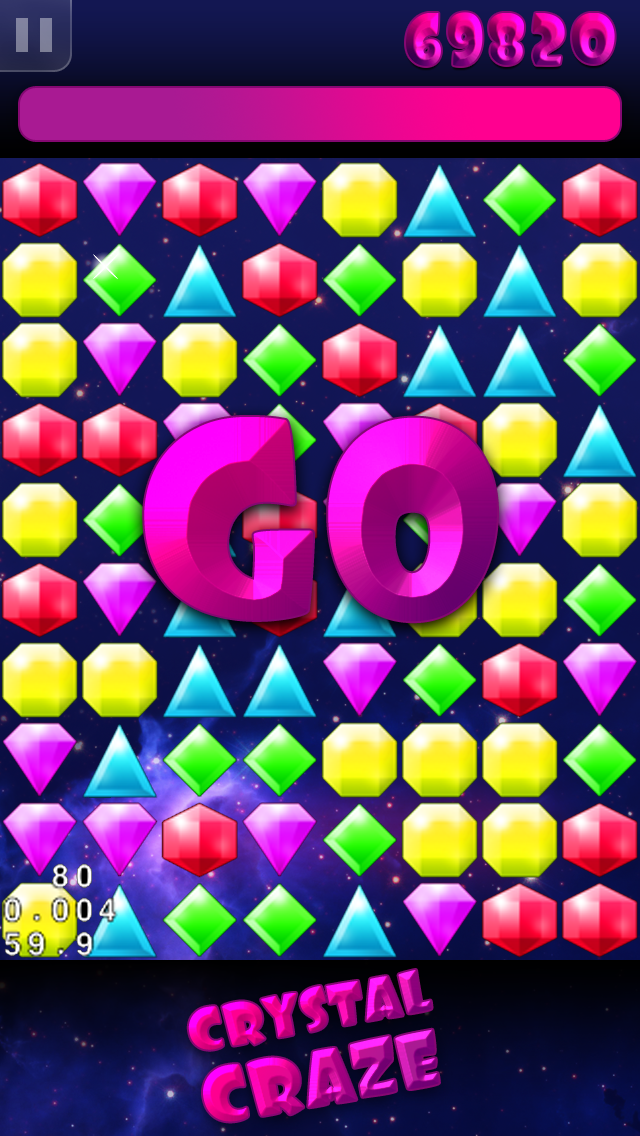
<style>
.page{position:relative;width:640px;height:1136px}
.page>*{position:absolute;margin:0}
.t1{font:284.6px "Foo-Regular"}
.t2{font:60.2px/74px "Foo-Regular"}
.t3{font:79.4px/74px "Foo-Regular"}
</style>
<div class="page">
<p class="t1" style="left:144px;top:417px;width:353px;height:205px">GO</p>
<p class="t2" style="left:188px;top:970px;width:251px;height:152px;text-align:center;rotate:-10deg">CRYSTAL<br><span class="t3">CRAZE</span></p>
</div>
